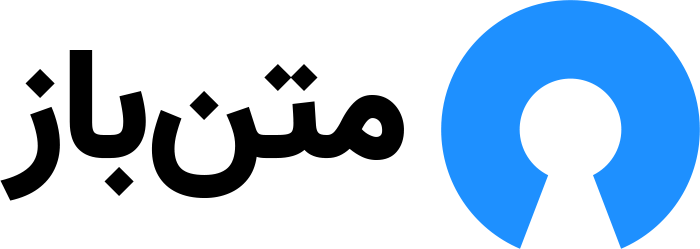
<style>
.page{position:relative;width:700px;height:249px;background:#ffffff}
.page>*{position:absolute;margin:0}
.t1{font:158.3px "Vazir-Black";color:#000000}
</style>
<div class="page">
<p class="t1" style="left:0px;top:50px;width:404px;height:151px">متن‌باز</p>
</div>
